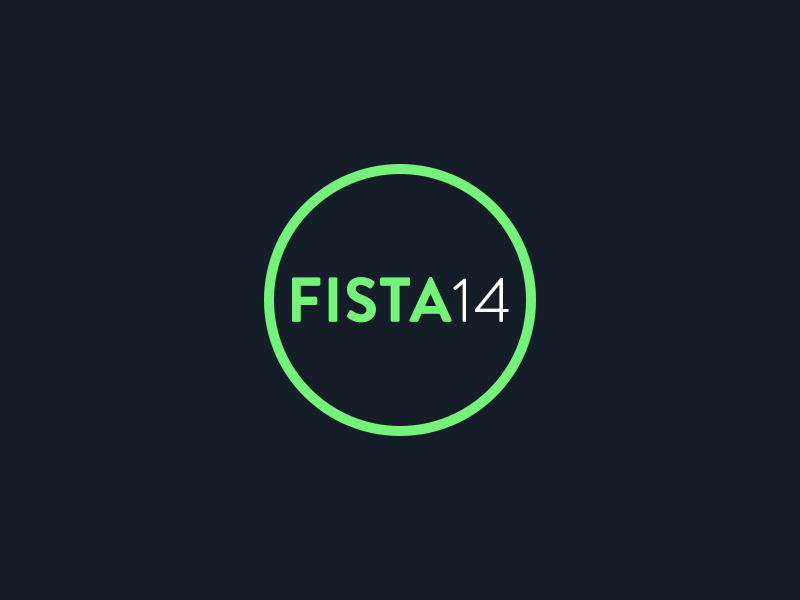
<style>
.page{position:relative;width:800px;height:600px;background:#141d28}
.page>*{position:absolute;margin:0}
.t1{font:62px "BrandonGrotesque-Bold";color:#74f27a;font-weight:bold}
.t2{font:62px "BrandonGrotesque-Light";color:#ffffff;font-weight:bold}
</style>
<div class="page">
<p class="t1" style="left:292px;top:277px;width:217px;height:46px">FISTA<span class="t2">14</span></p>
</div>
